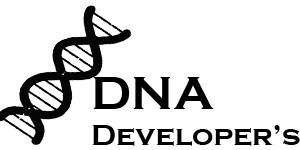
<style>
.page{position:relative;width:300px;height:150px;background:#ffffff}
.page>*{position:absolute;margin:0}
.t1{font:30px "CopperplateGothic-Bold";color:#000000}
.t2{font:48px "CopperplateGothic-Bold";color:#000000}
</style>
<div class="page">
<p class="t1" style="left:92px;top:77px;width:208px;height:69px"><span class="t2">DNA<br></span>Developer’s</p>
</div>
